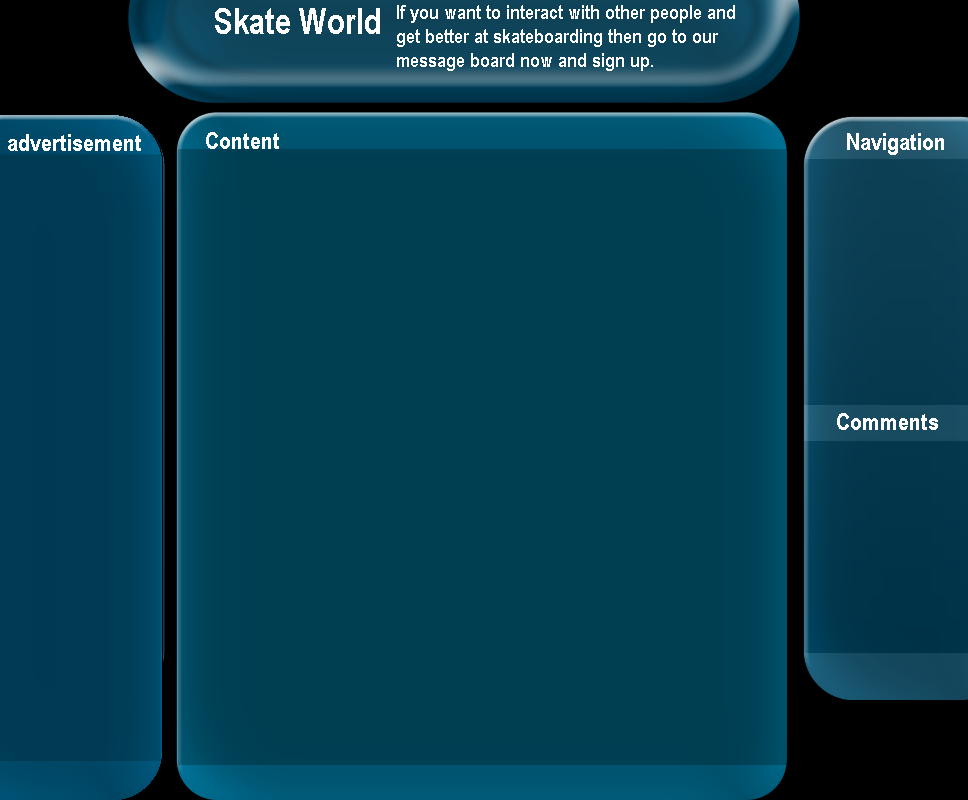
<style>
.page{position:relative;width:968px;height:800px;background:#003e52}
.page>*{position:absolute;margin:0}
.t1{font:20px "ArialNarrow-Bold";color:#ffffff}
.t2{font:36px "ArialNarrow-Bold";color:#ffffff}
.t3{font:24px "ArialNarrow-Bold";color:#ffffff}
</style>
<div class="page">
<p class="t1" style="left:397px;top:5px;width:338px;height:66px">If you want to interact with other people and get better at skateboarding then go to our <br>message board now and sign up.</p>
<p class="t2" style="left:215px;top:8px;width:165px;height:26px">Skate World</p>
<p class="t3" style="left:8px;top:134px;width:133px;height:17px">advertisement</p>
<p class="t3" style="left:206px;top:132px;width:73px;height:17px">Content</p>
<p class="t3" style="left:847px;top:133px;width:97px;height:22px">Navigation</p>
</div>
